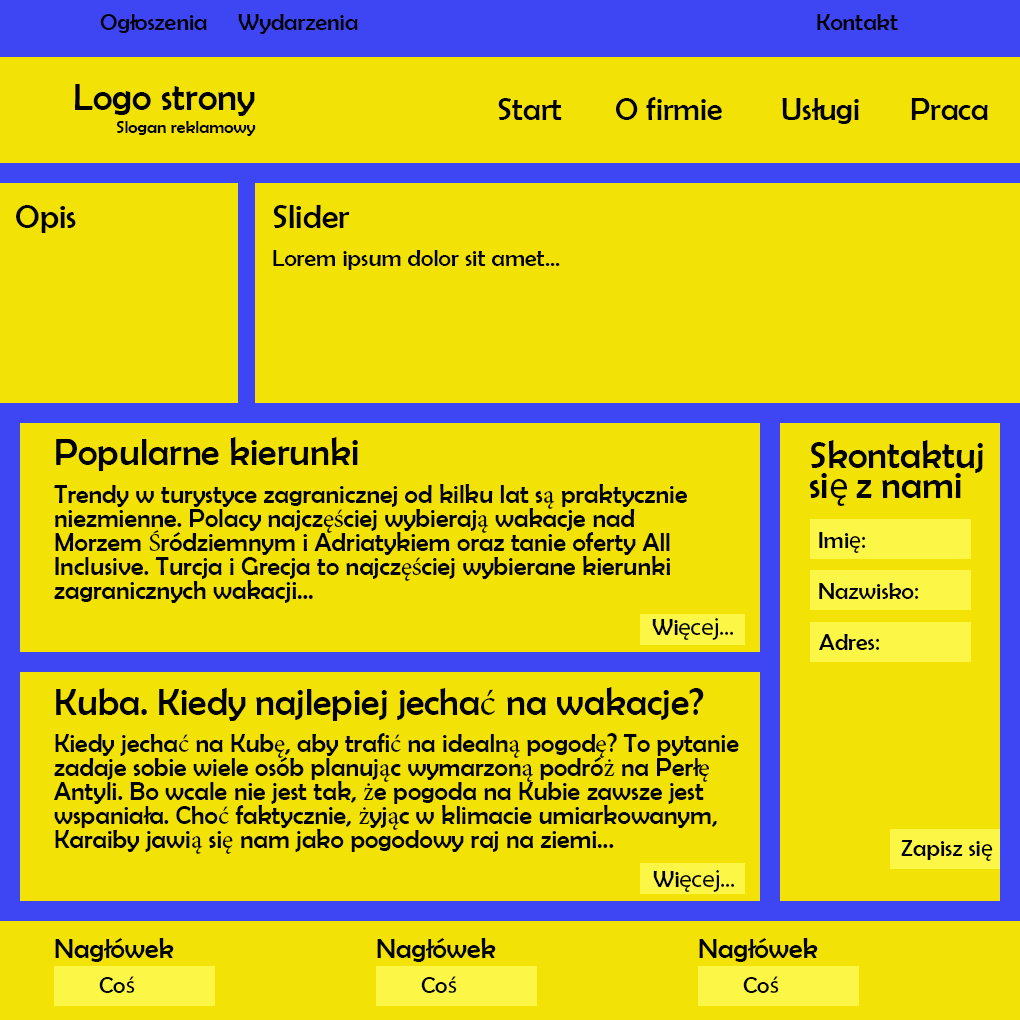
<style>
.page{position:relative;width:1020px;height:1020px;background:#f2e205}
.page>*{position:absolute;margin:0}
.t1{font:24px "BerlinSansFB-Reg";color:#000000}
.t2{font:38px "BerlinSansFB-Reg";color:#000000}
.t3{font:32px "BerlinSansFB-Reg";color:#000000}
.t4{font:18px "BerlinSansFB-Reg";color:#000000}
.t5{font:34px "BerlinSansFB-Reg";color:#000000}
.t6{font:38px/30px "BerlinSansFB-Reg";color:#000000}
.t7{font:38px/30px "MyriadPro-Regular";color:#000000}
.t8{font:26px/24px "BerlinSansFB-Reg";color:#000000}
.t9{font:26px/24px "MinionPro-Regular";color:#000000}
.t10{font:24px "MyriadPro-Regular";color:#000000}
.t11{font:38px "MinionPro-Regular";color:#000000}
.t12{font:28px "BerlinSansFB-Reg";color:#000000}
</style>
<div class="page">
<p class="t1" style="left:100px;top:14px;width:107px;height:19px">Ogłoszenia</p>
<p class="t1" style="left:238px;top:14px;width:120px;height:20px">Wydarzenia</p>
<p class="t1" style="left:817px;top:14px;width:81px;height:16px">Kontakt</p>
<p class="t2" style="left:75px;top:84px;width:180px;height:32px">Logo strony</p>
<p class="t3" style="left:498px;top:98px;width:64px;height:22px">Start</p>
<p class="t3" style="left:616px;top:97px;width:106px;height:23px">O firmie</p>
<p class="t3" style="left:782px;top:98px;width:77px;height:26px">Usługi</p>
<p class="t3" style="left:911px;top:98px;width:77px;height:22px">Praca</p>
<p class="t4" style="left:116px;top:121px;width:140px;height:15px">Slogan reklamowy</p>
<p class="t5" style="left:16px;top:205px;width:60px;height:28px">Opis</p>
<p class="t5" style="left:273px;top:205px;width:77px;height:23px">Slider</p>
<p class="t1" style="left:273px;top:250px;width:287px;height:20px">Lorem ipsum dolor sit amet...</p>
<p class="t2" style="left:56px;top:437px;width:302px;height:34px">Popularne kierunki</p>
<p class="t6" style="left:809px;top:440px;width:174px;height:66px">Skontaktuj si<span class="t7">ę </span>z nami</p>
<p class="t8" style="left:54px;top:484px;width:633px;height:119px">Trendy w turystyce zagranicznej od kilku lat s<span class="t9">ą</span> praktycznie niezmienne. Polacy najcz<span class="t9">ęś</span>ciej wybieraj<span class="t9">ą</span> wakacje nad Morzem <span class="t9">Ś</span>ródziemnym i Adriatykiem oraz tanie oferty All Inclusive. Turcja i Grecja to najcz<span class="t9">ęś</span>ciej wybierane kierunki zagranicznych wakacji...</p>
<p class="t1" style="left:819px;top:532px;width:47px;height:21px">Imi<span class="t10">ę:</span></p>
<p class="t1" style="left:819px;top:583px;width:100px;height:16px">Nazwisko<span class="t10">:</span></p>
<p class="t10" style="left:652px;top:618px;width:82px;height:22px"><span class="t1">Wi</span>ęcej...</p>
<p class="t1" style="left:819px;top:634px;width:61px;height:16px">Adres<span class="t10">:</span></p>
<p class="t2" style="left:56px;top:687px;width:648px;height:34px">Kuba. Kiedy najlepiej jecha<span class="t11">ć</span> na wakacje?</p>
<p class="t8" style="left:54px;top:733px;width:685px;height:121px">Kiedy jecha<span class="t9">ć</span> na Kub<span class="t9">ę</span>, aby trafi<span class="t9">ć</span> na idealn<span class="t9">ą</span> pogod<span class="t9">ę</span>? To pytanie zadaje sobie wiele osób planuj<span class="t9">ą</span>c wymarzon<span class="t9">ą</span> podró<span class="t9">ż</span> na Perł<span class="t9">ę</span> Antyli. Bo wcale nie jest tak, <span class="t9">ż</span>e pogoda na Kubie zawsze jest wspaniała. Cho<span class="t9">ć</span> faktycznie, <span class="t9">ż</span>yj<span class="t9">ą</span>c w klimacie umiarkowanym, Karaiby jawi<span class="t9">ą</span> si<span class="t9">ę</span> nam jako pogodowy raj na ziemi...</p>
<p class="t1" style="left:901px;top:840px;width:92px;height:21px">Zapisz si<span class="t10">ę</span></p>
<p class="t10" style="left:653px;top:870px;width:82px;height:22px"><span class="t1">Wi</span>ęcej...</p>
<p class="t12" style="left:55px;top:938px;width:119px;height:24px">Nagłówek</p>
<p class="t12" style="left:377px;top:938px;width:119px;height:24px">Nagłówek</p>
<p class="t12" style="left:699px;top:938px;width:119px;height:24px">Nagłówek</p>
<p class="t1" style="left:99px;top:976px;width:36px;height:17px">Co<span class="t10">ś</span></p>
<p class="t1" style="left:421px;top:976px;width:36px;height:17px">Co<span class="t10">ś</span></p>
<p class="t1" style="left:743px;top:976px;width:36px;height:17px">Co<span class="t10">ś</span></p>
</div>
